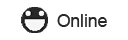
<style>
.page{position:relative;width:128px;height:40px;background:#ffffff}
.page>*{position:absolute;margin:0}
.t1{font:17.5px "ArialMT";color:#282828}
</style>
<div class="page">
<p class="t1" style="left:57px;top:14px;width:50px;height:13px">Online</p>
</div>
